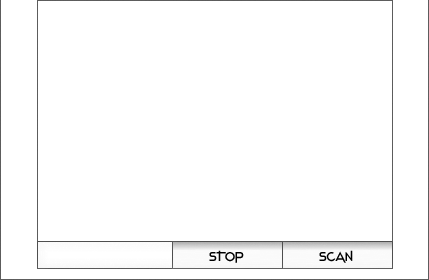
<style>
.page{position:relative;width:429px;height:280px;background:#ffffff}
.page>*{position:absolute;margin:0}
.t1{font:13.3px "Stentiga-Regular";color:#000000}
</style>
<div class="page">
<p class="t1" style="left:209px;top:250px;width:35px;height:13px">STOP</p>
<p class="t1" style="left:319px;top:250px;width:34px;height:13px">SCAN</p>
</div>
